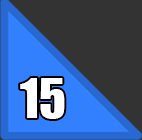
<style>
.page{position:relative;width:142px;height:140px;background:#333333}
.page>*{position:absolute;margin:0}
.t1{font:50px "Impact";color:#ffffff}
</style>
<div class="page">
<p class="t1" style="left:20px;top:78px;width:45px;height:41px">15</p>
</div>
